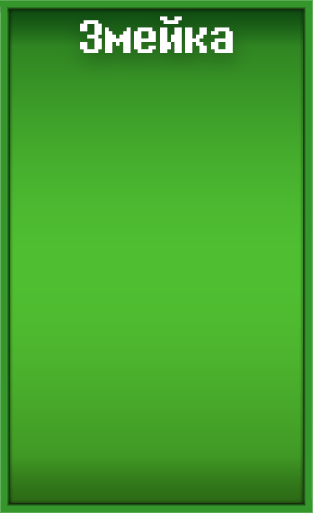
<style>
.page{position:relative;width:313px;height:513px}
.page>*{position:absolute;margin:0}
.t1{font:58.3px "Determination2";color:#ffffff}
</style>
<div class="page">
<p class="t1" style="left:80px;top:16px;width:153px;height:37px">Змейка</p>
</div>
